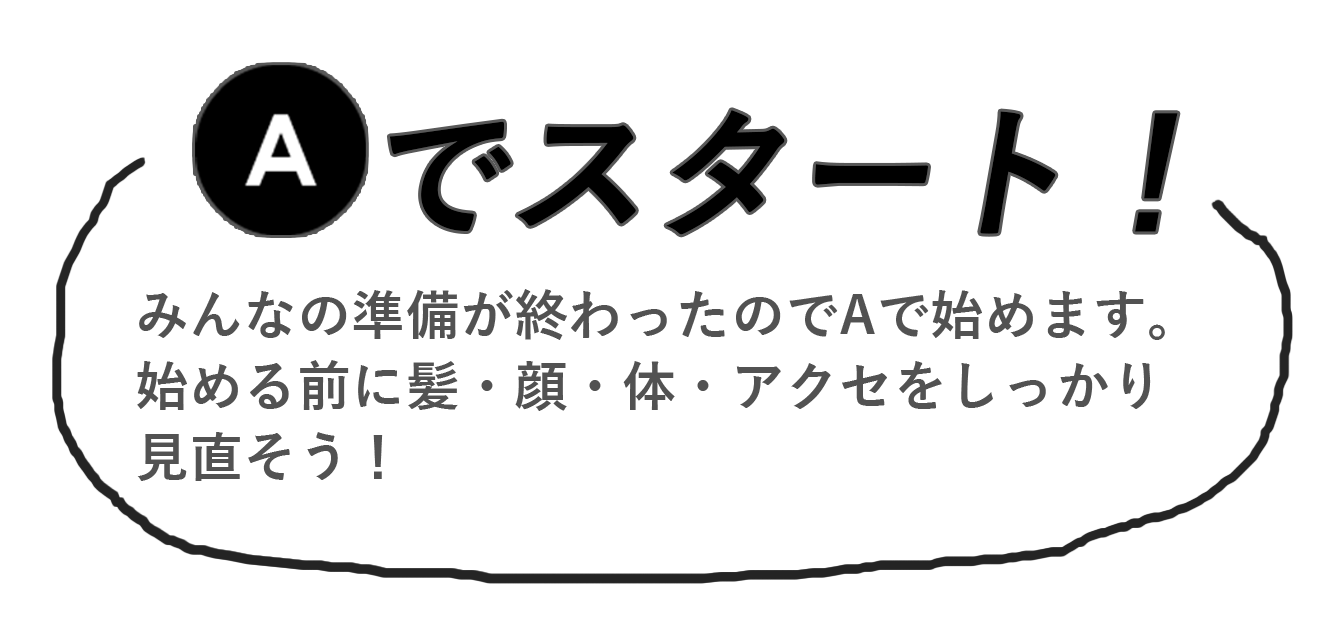
<style>
.page{position:relative;width:1344px;height:640px;background:#ffffff}
.page>*{position:absolute;margin:0}
.t1{font:142.5px "YuGothic-Bold";color:#000000;font-style:italic}
.t2{font:54.2px/70.8px "YuGothic-Bold";color:#525252}
</style>
<div class="page">
<p class="t1" style="left:389px;top:110px;width:789px;height:125px">でスタート！</p>
<p class="t2" style="left:137px;top:289px;width:1028px;height:192px">みんなの準備が終わったのでAで始めます。<br>始める前に髪・顔・体・アクセをしっかり<br>見直そう！</p>
</div>
